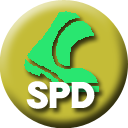
<style>
.page{position:relative;width:128px;height:128px;background:#ffffff}
.page>*{position:absolute;margin:0}
.t1{font:37px "DFGothic-UB-WING-RKSJ-H";color:#ffffff}
</style>
<div class="page">
<p class="t1" style="left:26px;top:81px;width:69px;height:28px">SPD</p>
</div>
